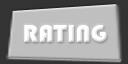
<style>
.page{position:relative;width:128px;height:64px;background:#bfbfbf}
.page>*{position:absolute;margin:0}
.t1{font:26px "Bauhaus93";color:#ffffff}
</style>
<div class="page">
<p class="t1" style="left:24px;top:25px;width:83px;height:17px">RATING</p>
</div>
